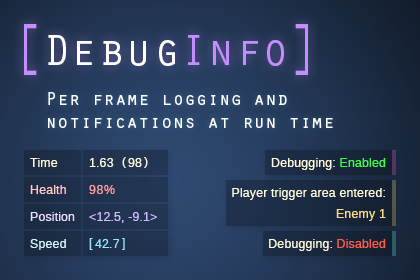
<style>
.page{position:relative;width:420px;height:280px}
.page>*{position:absolute;margin:0}
.t1{font:70.2px "OratorStd";color:#c48eff;scale:0.65 1}
.t2{font:45.5px "OratorStd";color:#ffffff}
.t3{font:45.5px "OratorStd";color:#c48eff}
.t4{font:19.3px "OratorStd";color:#ffffff}
.t5{font:12px "LiberationSansNarrow";color:#fffbdf;scale:1.29 1}
.t6{font:12px "LiberationSansNarrow";color:#3fff47;scale:1.29 1}
.t7{font:12px "LiberationSansNarrow";color:#ffcaca;scale:1.29 1}
.t8{font:12px "LiberationSansNarrow";letter-spacing:0.03em;color:#ff9f9f;scale:1.29 1}
.t9{font:12px/21px "LiberationSansNarrow";color:#fffbdf;scale:1.29 1}
.t10{font:12px/21px "LiberationSansNarrow";color:#ffdc8c;scale:1.29 1}
.t11{font:12px "LiberationSansNarrow";color:#e7dfff;scale:1.29 1}
.t12{font:12px "LiberationSansNarrow";color:#cdbcff;scale:1.29 1}
.t13{font:12px "LiberationSansNarrow";color:#d6f6ff;scale:1.29 1}
.t14{font:12px "LiberationSansNarrow";color:#94e7ff;scale:1.29 1}
.t15{font:12px "LiberationSansNarrow";color:#ff5d48;scale:1.29 1}
</style>
<div class="page">
<p class="t1" style="left:24px;top:24px;width:13px;height:51px">[</p>
<p class="t1" style="left:295px;top:24px;width:13px;height:51px">]</p>
<p class="t2" style="left:48px;top:35px;width:236px;height:31px">Debug<span class="t3">Info</span></p>
<p class="t4" style="left:48px;top:92px;width:285px;height:36px">Per frame logging and<br>notifications at run time</p>
<p class="t5" style="left:30px;top:158px;width:28px;height:9px">Time</p>
<p class="t5" style="left:89px;top:158px;width:25px;height:9px">1.63</p>
<p class="t5" style="left:122px;top:157px;width:4px;height:11px">(</p>
<p class="t5" style="left:128px;top:158px;width:14px;height:9px">98</p>
<p class="t5" style="left:144px;top:157px;width:4px;height:11px">)</p>
<p class="t5" style="left:271px;top:158px;width:115px;height:12px">Debugging: <span class="t6">Enabled</span></p>
<p class="t7" style="left:30px;top:185px;width:36px;height:9px">Health</p>
<p class="t8" style="left:89px;top:185px;width:26px;height:9px">98%</p>
<p class="t9" style="left:232px;top:188px;width:154px;height:33px;text-align:right">Player trigger area entered:<br><span class="t10">Enemy 1</span></p>
<p class="t11" style="left:30px;top:212px;width:45px;height:9px">Position</p>
<p class="t12" style="left:89px;top:212px;width:68px;height:11px">&lt;12.5, -9.1&gt;</p>
<p class="t13" style="left:30px;top:239px;width:36px;height:11px">Speed</p>
<p class="t14" style="left:89px;top:238px;width:4px;height:12px">[</p>
<p class="t14" style="left:95px;top:239px;width:24px;height:9px">42.7</p>
<p class="t14" style="left:122px;top:238px;width:3px;height:12px">]</p>
<p class="t5" style="left:269px;top:239px;width:117px;height:12px">Debugging: <span class="t15">Disabled</span></p>
</div>
